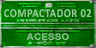
<style>
.page{position:relative;width:96px;height:48px}
.page>*{position:absolute;margin:0}
.t1{font:12px "Calibri-Bold";letter-spacing:0.04em;color:#9cdfa1;scale:0.88 1}
.t2{font:9.2px "Arial-BoldMT";letter-spacing:0.01em;color:#81c685;scale:1.09 1}
</style>
<div class="page">
<p class="t1" style="left:4px;top:9px;width:88px;height:9px;opacity:0.85">COMPACTADOR 02</p>
<p class="t2" style="left:26px;top:33px;width:43px;height:7px">ACESSO</p>
</div>
